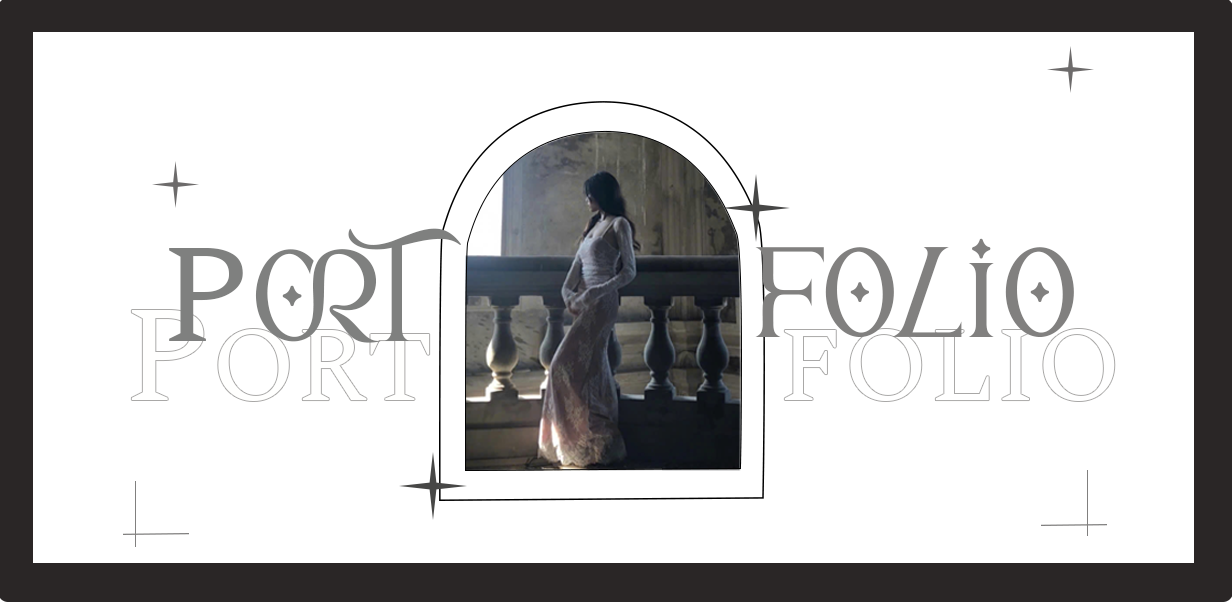
<style>
.page{position:relative;width:1232px;height:602px;background:#ffffff}
.page>*{position:absolute;margin:0}
.t1{font:108.6px "SunrollBold";color:#7f807f}
.t2{font:141.2px "#9Slide04Spectral";color:#7f807f}
.t3{font:103.2px "SunrollBold";color:#7f807f}
.t4{font:106.1px "SunrollBold";color:#81807f}
</style>
<div class="page">
<p class="t1" style="left:169px;top:228px;width:292px;height:115px"><span class="t2">P</span>OR<span class="t3">T</span></p>
<p class="t4" style="left:755px;top:238px;width:319px;height:99px">FOLIO</p>
</div>
